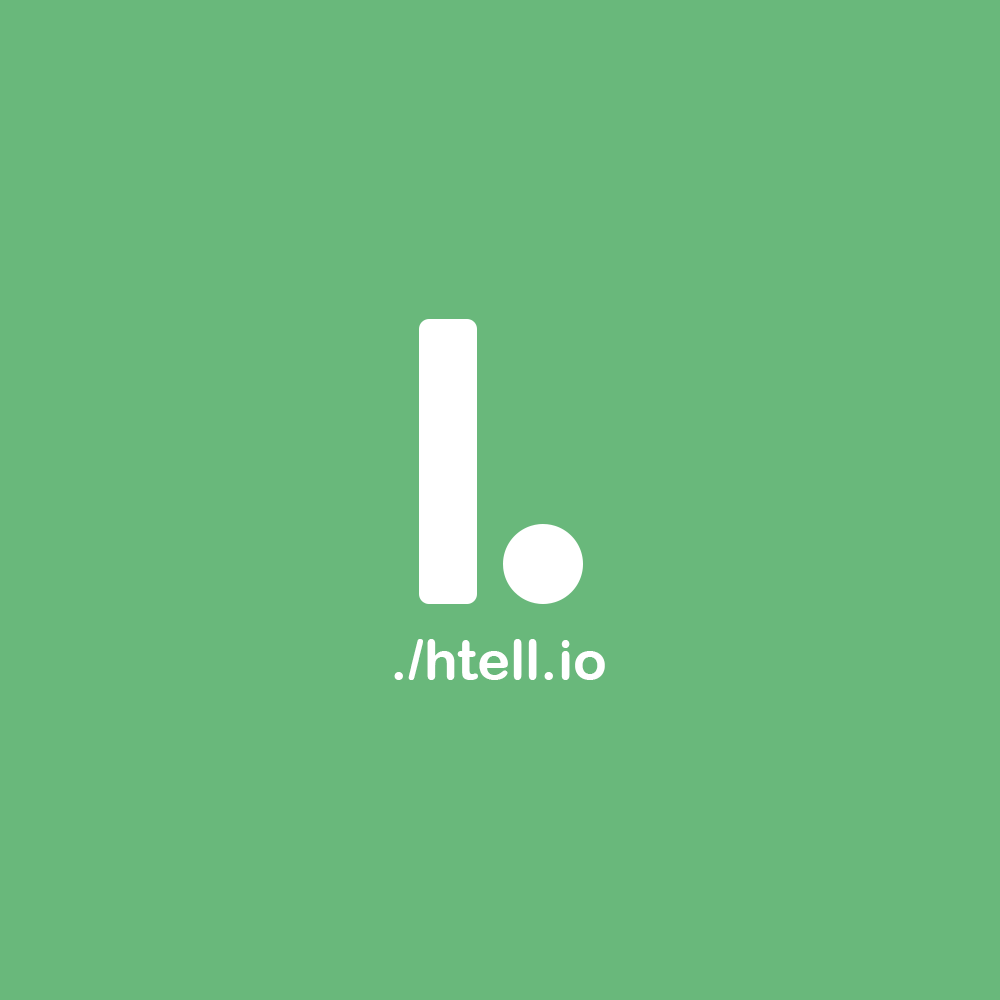
<style>
.page{position:relative;width:1000px;height:1000px;background:#69b87b}
.page>*{position:absolute;margin:0}
.t1{font:55.7px "ArialRoundedMTBold";color:#ffffff}
</style>
<div class="page">
<p class="t1" style="left:394px;top:639px;width:211px;height:41px">./htell.io</p>
</div>
